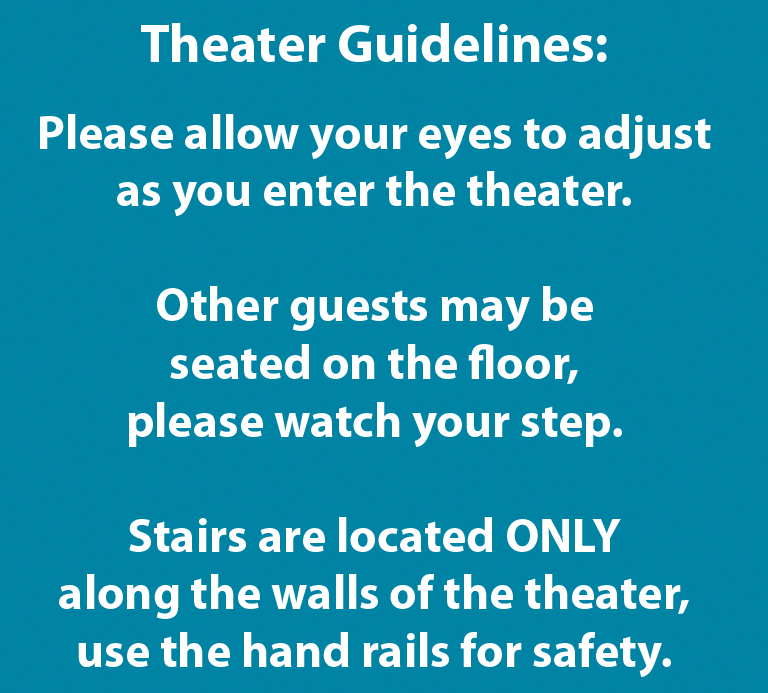
<style>
.page{position:relative;width:768px;height:693px;background:#0084a4}
.page>*{position:absolute;margin:0}
.t1{font:48px "MyriadPro-Bold";color:#ffffff}
.t2{font:54px "MyriadPro-Bold";color:#ffffff}
</style>
<div class="page">
<p class="t1" style="left:40px;top:23px;width:671px;height:654px;text-align:center"><span class="t2">Theater Guidelines:<br><br></span>Please allow your eyes to adjust<br>as you enter the theater.<br><br>Other guests may be<br>seated on the floor,<br>please watch your step.<br><br>Stairs are located ONLY<br>along the walls of the theater,<br>use the hand rails for safety.</p>
</div>
